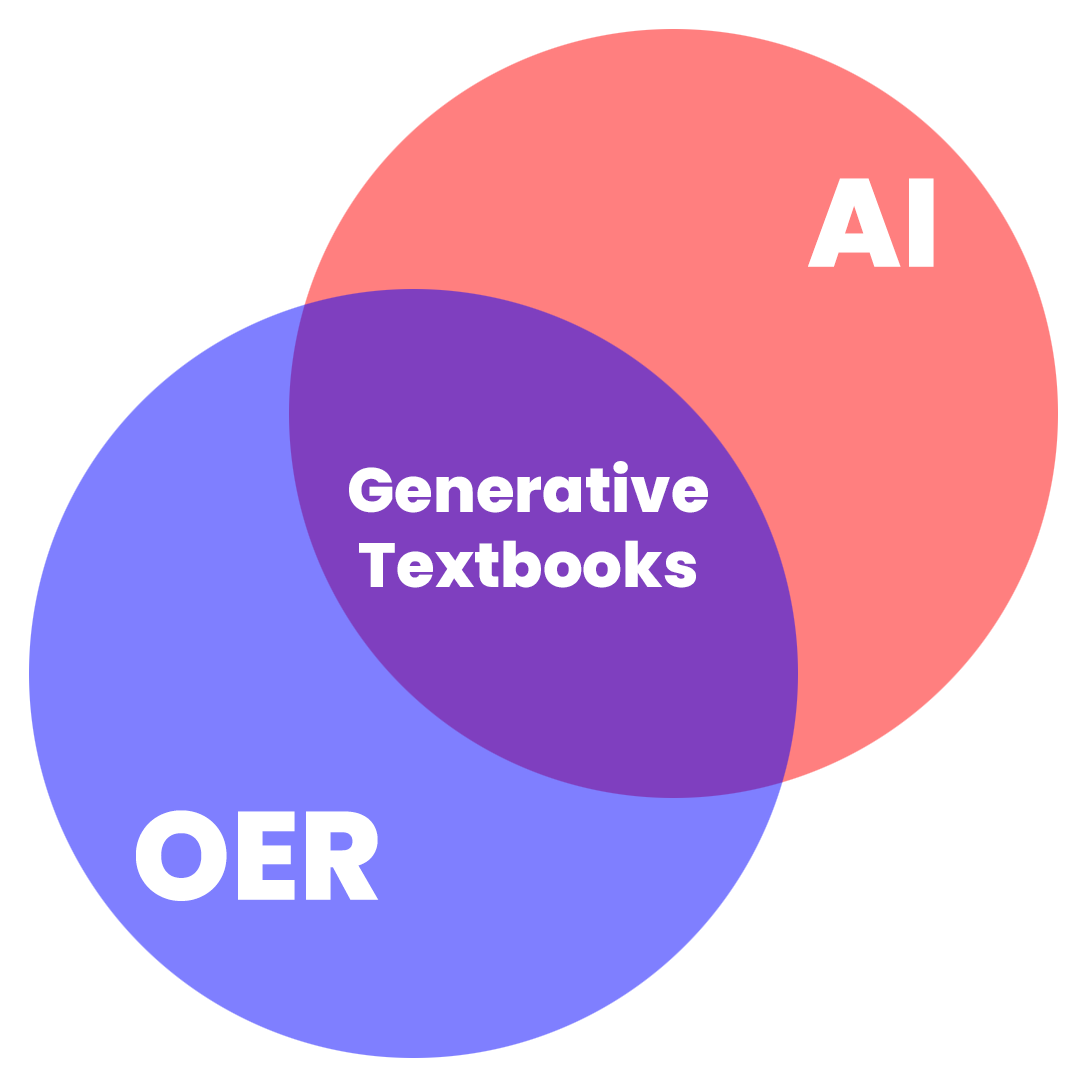
<style>
.page{position:relative;width:1080px;height:1080px;background:#ffffff}
.page>*{position:absolute;margin:0}
.t1{font:125px "Poppins-ExtraBold";color:#ffffff}
.t2{font:62.5px "Poppins-ExtraBold";color:#ffffff}
</style>
<div class="page">
<p class="t1" style="left:808px;top:178px;width:126px;height:89px">AI</p>
<p class="t2" style="left:349px;top:461px;width:359px;height:127px;text-align:center">Generative<br>Textbooks</p>
<p class="t1" style="left:136px;top:810px;width:243px;height:91px">OER</p>
</div>
